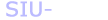
<style>
.page{position:relative;width:108px;height:20px;background:#ffffff}
.page>*{position:absolute;margin:0}
.t1{font:20px "Verdana";color:#bbbbff;font-weight:bold}
.t2{font:20px "Verdana";color:#ffffff;font-weight:bold}
</style>
<div class="page">
<p class="t1" style="left:6px;top:0px;width:95px;height:17px">SIU-<span class="t2">Toba</span></p>
</div>
